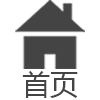
<style>
.page{position:relative;width:100px;height:100px;background:#ffffff}
.page>*{position:absolute;margin:0}
.t1{font:27.8px "MicrosoftYaHei";color:#444444}
</style>
<div class="page">
<p class="t1" style="left:22px;top:71px;width:56px;height:27px">首页</p>
</div>
